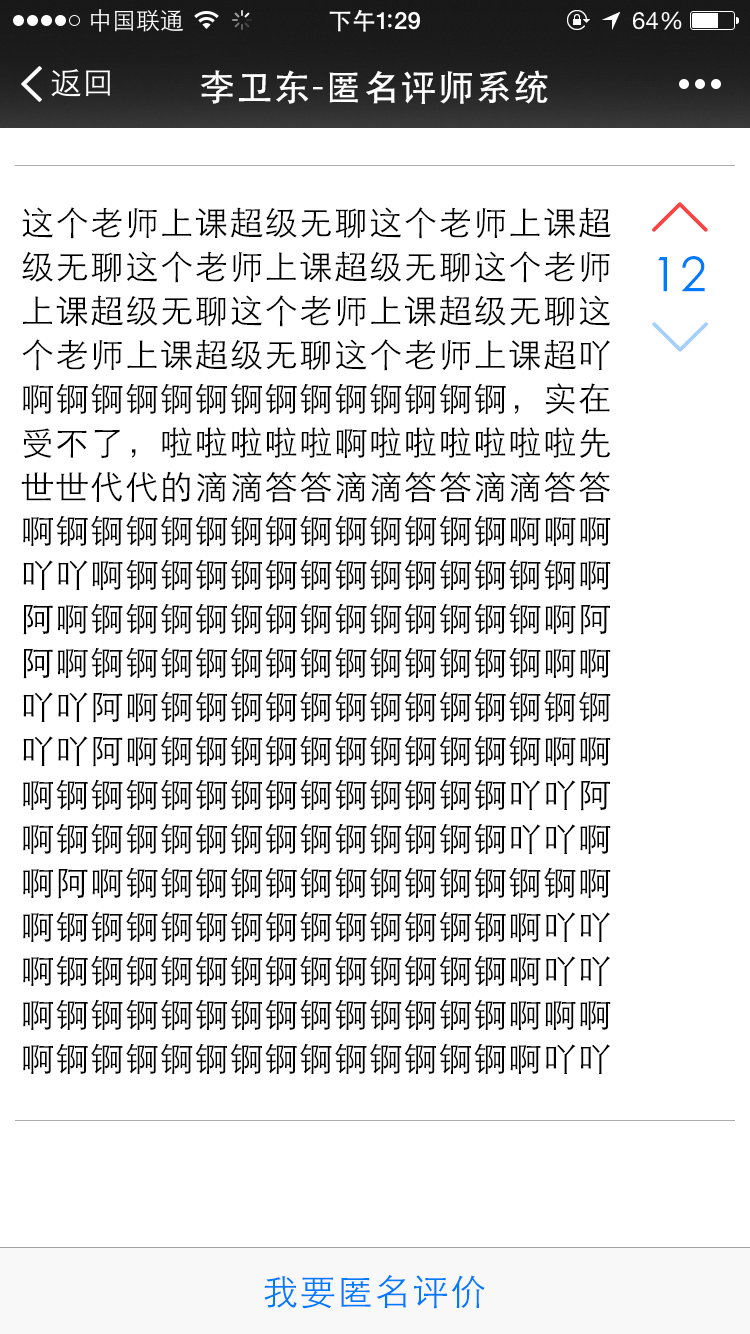
<style>
.page{position:relative;width:750px;height:1334px;background:#ffffff}
.page>*{position:absolute;margin:0}
.t1{font:36px "STHeiti";letter-spacing:0.045em;color:#ffffff}
.t2{font:33.3px/11px "STXihei";letter-spacing:0.045em;color:#000000}
.t3{font:48px "STXihei";letter-spacing:0.045em;color:#007aff}
.t4{font:36px "STXihei";letter-spacing:0.045em;color:#007aff}
</style>
<div class="page">
<p class="t1" style="left:200px;top:70px;width:348px;height:34px">李卫东-匿名评师系统</p>
<p class="t2" style="left:21px;top:207px;width:590px;height:867px">这个老师上课超级无聊这个老师上课超<br><br><br><br>级无聊这个老师上课超级无聊这个老师<br><br><br><br>上课超级无聊这个老师上课超级无聊这<br><br><br><br>个老师上课超级无聊这个老师上课超吖<br><br><br><br>啊锕锕锕锕锕锕锕锕锕锕锕锕锕，实在<br><br><br><br>受不了，啦啦啦啦啦啊啦啦啦啦啦啦先<br><br><br><br>世世代代的滴滴答答滴滴答答滴滴答答<br><br><br><br>啊锕锕锕锕锕锕锕锕锕锕锕锕锕啊啊啊<br><br><br><br>吖吖啊锕锕锕锕锕锕锕锕锕锕锕锕锕啊<br><br><br><br>阿啊锕锕锕锕锕锕锕锕锕锕锕锕锕啊阿<br><br><br><br>阿啊锕锕锕锕锕锕锕锕锕锕锕锕锕啊啊<br><br><br><br>吖吖阿啊锕锕锕锕锕锕锕锕锕锕锕锕锕<br><br><br><br>吖吖阿啊锕锕锕锕锕锕锕锕锕锕锕啊啊<br><br><br><br>啊锕锕锕锕锕锕锕锕锕锕锕锕锕吖吖阿<br><br><br><br>啊锕锕锕锕锕锕锕锕锕锕锕锕锕吖吖啊<br><br><br><br>啊阿啊锕锕锕锕锕锕锕锕锕锕锕锕锕啊<br><br><br><br>啊锕锕锕锕锕锕锕锕锕锕锕锕锕啊吖吖<br><br><br><br>啊锕锕锕锕锕锕锕锕锕锕锕锕锕啊吖吖<br><br><br><br>啊锕锕锕锕锕锕锕锕锕锕锕锕锕啊啊啊<br><br><br><br>啊锕锕锕锕锕锕锕锕锕锕锕锕锕啊吖吖</p>
<p class="t3" style="left:658px;top:256px;width:47px;height:36px">12</p>
<p class="t4" style="left:264px;top:1274px;width:221px;height:35px">我要匿名评价</p>
</div>
